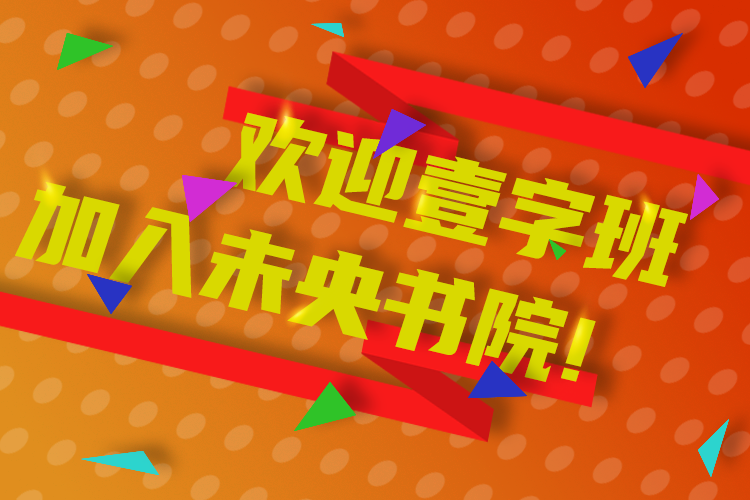
<style>
.page{position:relative;width:750px;height:500px}
.page>*{position:absolute;margin:0}
.t1{font:111.5px "YouSheBiaoTiHei";color:#d9d900;scale:0.9 1}
</style>
<div class="page">
<p class="t1" style="left:222px;top:112px;width:466px;height:175px;rotate:13deg">欢迎壹字班</p>
<p class="t1" style="left:15px;top:182px;width:581px;height:200px;rotate:13deg">加入未央书院!</p>
</div>
